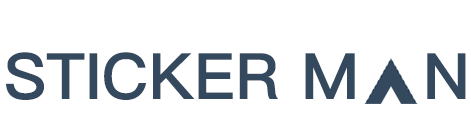
<style>
.page{position:relative;width:471px;height:135px;background:#ffffff}
.page>*{position:absolute;margin:0}
.t1{font:64px "PingFangTC-Semibold";color:#35495e}
</style>
<div class="page">
<p class="t1" style="left:6px;top:52px;width:460px;height:48px">STICKER M   N</p>
</div>
